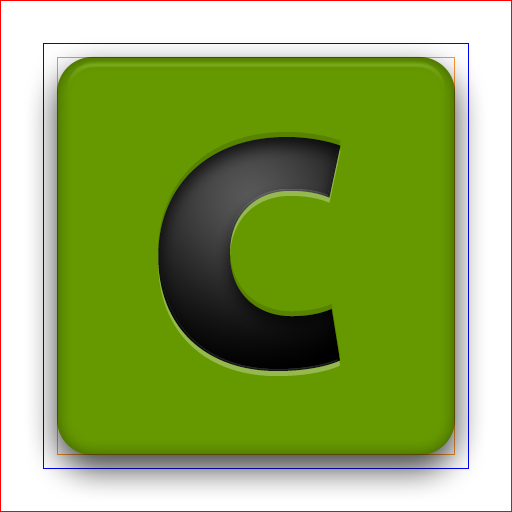
<style>
.page{position:relative;width:512px;height:512px;background:#669900}
.page>*{position:absolute;margin:0}
.t1{font:460px "MyriadPro-Bold"}
</style>
<div class="page">
<p class="t1" style="left:158px;top:137px;width:183px;height:234px">c</p>
<p class="t1" style="left:158px;top:137px;width:183px;height:234px">c</p>
</div>
